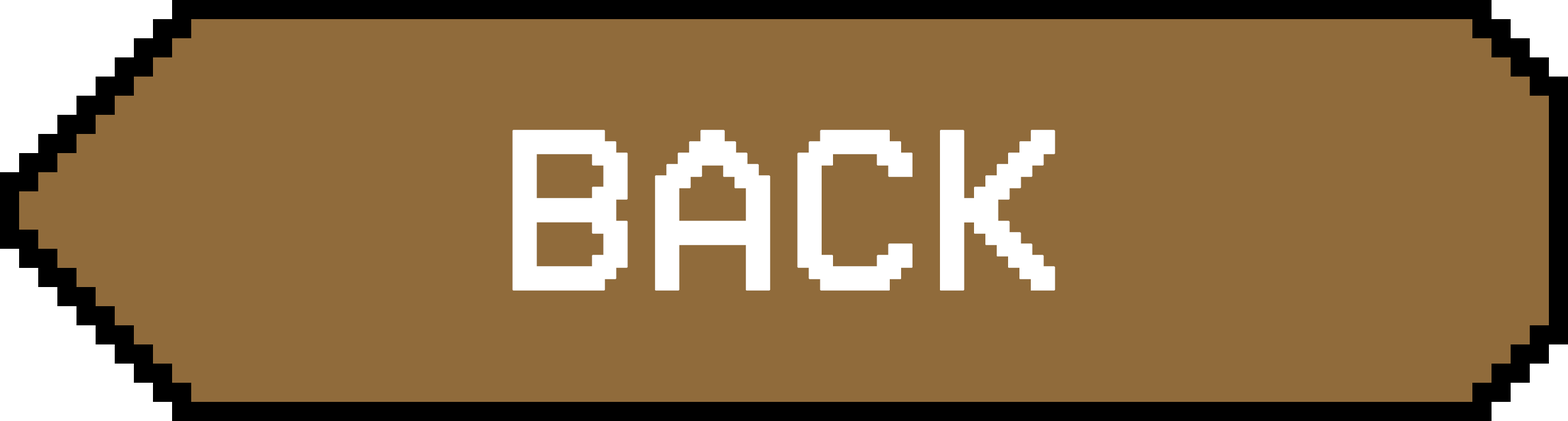
<style>
.page{position:relative;width:1568px;height:421px;background:#906b3b}
.page>*{position:absolute;margin:0}
.t1{font:232.4px "VCROSDMono";color:#ffffff;font-weight:bold}
</style>
<div class="page">
<p class="t1" style="left:512px;top:130px;width:543px;height:160px">BACK</p>
</div>
